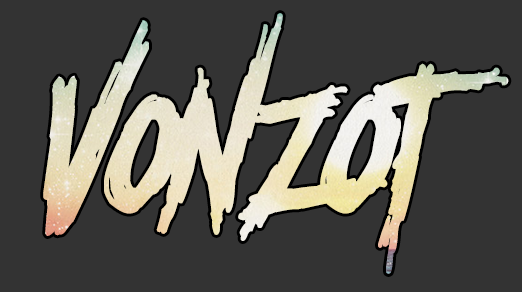
<style>
.page{position:relative;width:522px;height:292px;background:#333333}
.page>*{position:absolute;margin:0}
.t1{font:271.7px "AnotherAmerica";font-weight:bold;scale:0.87 1}
</style>
<div class="page">
<p class="t1" style="left:43px;top:13px;width:466px;height:261px">Vonzot</p>
</div>
